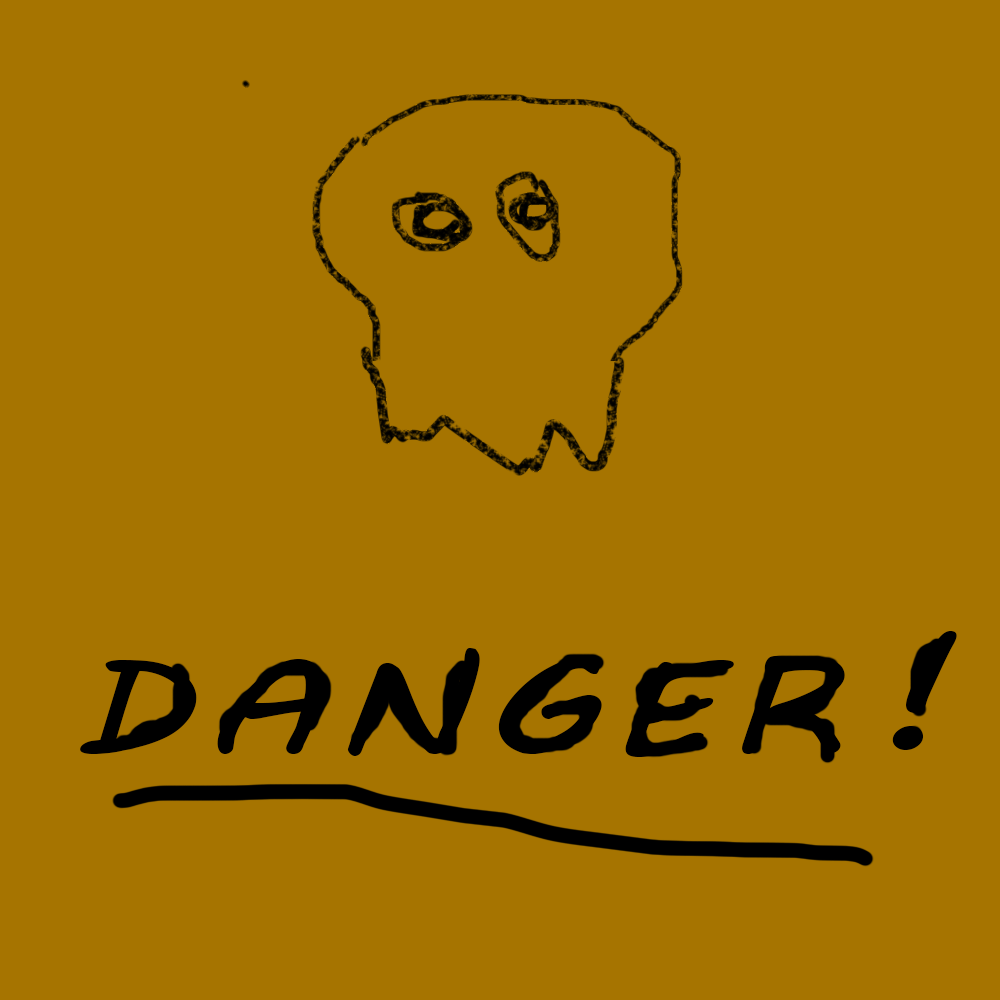
<style>
.page{position:relative;width:1000px;height:1000px;background:#a67400}
.page>*{position:absolute;margin:0}
.t1{font:164.5px "MVBoli";letter-spacing:0.08em;color:#000000;scale:1.26 1}
.t2{font:135px "MVBoli";letter-spacing:0.08em;color:#000000;scale:1.25 1}
</style>
<div class="page">
<p class="t1" style="left:892px;top:631px;width:65px;height:119px">!</p>
<p class="t2" style="left:80px;top:648px;width:765px;height:109px">DANGER</p>
</div>
